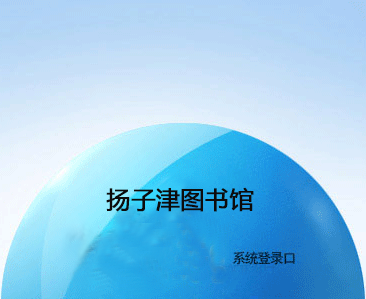
<style>
.page{position:relative;width:366px;height:299px}
.page>*{position:absolute;margin:0}
.t1{font:24px "MicrosoftYaHei";color:#0d0c0c;font-weight:bold}
</style>
<div class="page">
<p class="t1" style="left:106px;top:187px;width:148px;height:25px">扬子津图书馆</p>
</div>
